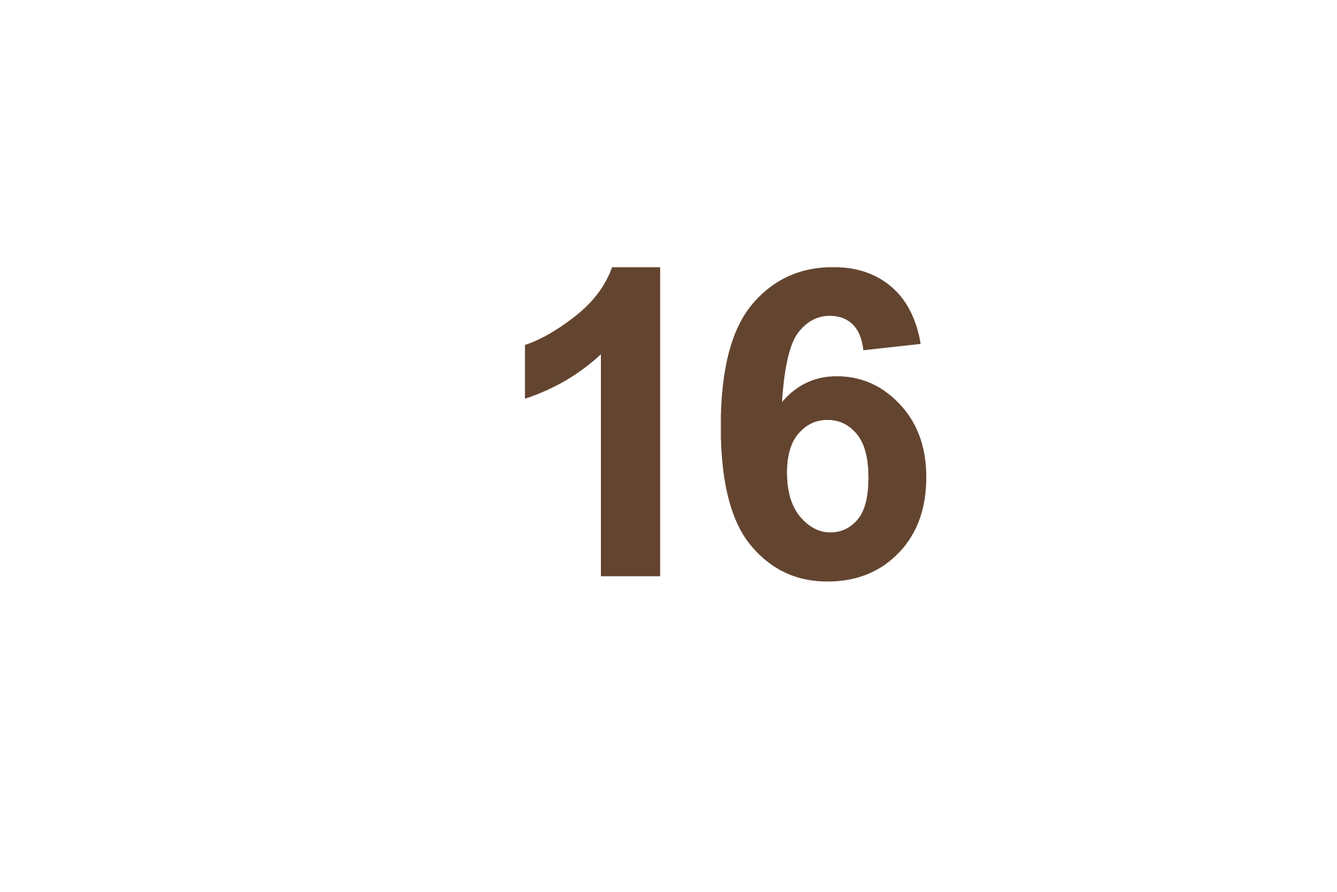
<style>
.page{position:relative;width:1337px;height:892px;background:#ffffff}
.page>*{position:absolute;margin:0}
.t1{font:429.6px "Arial-BoldMT";color:#63442f}
</style>
<div class="page">
<p class="t1" style="left:525px;top:267px;width:402px;height:315px">16</p>
</div>
